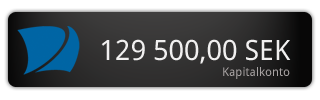
<style>
.page{position:relative;width:320px;height:100px}
.page>*{position:absolute;margin:0}
.t1{font:28px "DroidSans";color:#f1f0f0}
.t2{font:12px "DroidSans";color:#a8a3a3}
</style>
<div class="page">
<p class="t1" style="left:101px;top:39px;width:190px;height:25px">129 500,00 SEK</p>
<p class="t2" style="left:223px;top:67px;width:67px;height:12px">Kapitalkonto</p>
</div>
